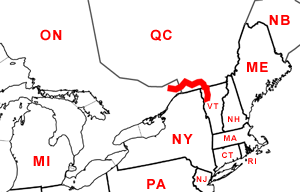
<style>
.page{position:relative;width:300px;height:192px;background:#ffffff}
.page>*{position:absolute;margin:0}
.t1{font:14px "Arial-BoldMT";letter-spacing:0.1em;color:#ff0000}
.t2{font:8.1px "Arial-BoldMT";letter-spacing:0.1em}
.t3{font:8.1px "Arial-BoldMT";letter-spacing:0.1em;color:#ff0000}
</style>
<div class="page">
<p class="t1" style="left:269px;top:15px;width:21px;height:10px">NB</p>
<p class="t1" style="left:40px;top:29px;width:22px;height:12px">ON</p>
<p class="t1" style="left:150px;top:29px;width:22px;height:12px">QC</p>
<p class="t1" style="left:247px;top:62px;width:21px;height:10px">ME</p>
<p class="t2" style="left:207px;top:103px;width:12px;height:6px">VT</p>
<p class="t3" style="left:228px;top:116px;width:12px;height:6px">NH</p>
<p class="t1" style="left:172px;top:134px;width:21px;height:10px">NY</p>
<p class="t3" style="left:224px;top:135px;width:13px;height:6px">MA</p>
<p class="t1" style="left:33px;top:156px;width:17px;height:10px">MI</p>
<p class="t3" style="left:222px;top:152px;width:11px;height:6px">CT</p>
<p class="t3" style="left:248px;top:158px;width:8px;height:6px">RI</p>
<p class="t1" style="left:147px;top:179px;width:19px;height:10px">PA</p>
<p class="t3" style="left:196px;top:176px;width:11px;height:6px">NJ</p>
</div>
